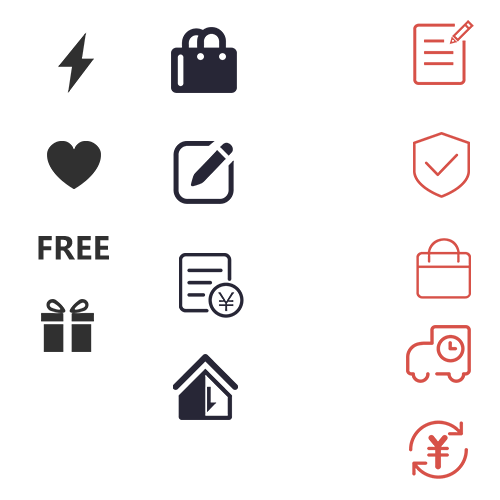
<style>
.page{position:relative;width:500px;height:500px;background:#ffffff}
.page>*{position:absolute;margin:0}
.t1{font:31px "MicrosoftYaHei-Bold";color:#1b1b1b}
</style>
<div class="page">
<p class="t1" style="left:38px;top:236px;width:71px;height:24px">FREE</p>
</div>
